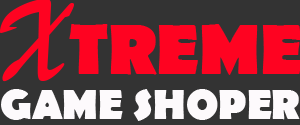
<style>
.page{position:relative;width:300px;height:125px;background:#333333}
.page>*{position:absolute;margin:0}
.t1{font:72px "BerlinSansFB-Bold";color:#fe0321}
.t2{font:120px "BrushScriptMT";color:#fe0321}
.t3{font:42px "BerlinSansFB-Bold";color:#fdfafc}
</style>
<div class="page">
<p class="t1" style="left:0px;top:0px;width:302px;height:82px"><span class="t2">X</span>TREME</p>
<p class="t3" style="left:1px;top:89px;width:299px;height:32px">GAME SHOPER</p>
</div>
